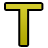
<style>
.page{position:relative;width:48px;height:48px;background:#ffffff}
.page>*{position:absolute;margin:0}
.t1{font:55px "Verdana";color:#cdc526;font-weight:bold}
</style>
<div class="page">
<p class="t1" style="left:6px;top:4px;width:36px;height:41px">T</p>
</div>
